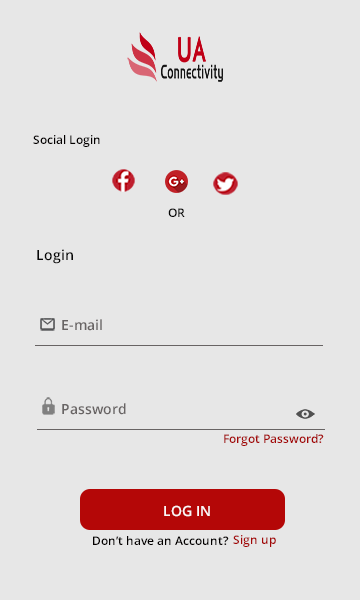
<style>
.page{position:relative;width:360px;height:600px;background:#e7e7e7}
.page>*{position:absolute;margin:0}
.t1{font:12px "OpenSans-Semibold";color:#030000}
.t2{font:12px "OpenSans-Semibold";color:#070707}
.t3{font:14px "OpenSans-Semibold";color:#070707}
.t4{font:14px "OpenSans-Semibold";color:#686464}
.t5{font:12px "OpenSans-Semibold";color:#a40707}
.t6{font:14px "OpenSans-Semibold";color:#fcf6f6}
</style>
<div class="page">
<p class="t1" style="left:33px;top:135px;width:67px;height:12px">Social Login</p>
<p class="t2" style="left:168px;top:208px;width:17px;height:9px">OR</p>
<p class="t3" style="left:37px;top:249px;width:36px;height:15px">Login</p>
<p class="t4" style="left:62px;top:319px;width:40px;height:12px">E-mail</p>
<p class="t4" style="left:62px;top:403px;width:64px;height:12px">Password</p>
<p class="t5" style="left:224px;top:434px;width:100px;height:12px">Forgot Password?</p>
<p class="t6" style="left:164px;top:505px;width:46px;height:12px"><span class="t1"><br><br>    <br></span>    LOG IN</p>
<p class="t1" style="left:93px;top:536px;width:136px;height:9px">Don’t have an Account?</p>
<p class="t5" style="left:233px;top:535px;width:43px;height:12px">Sign up</p>
</div>
